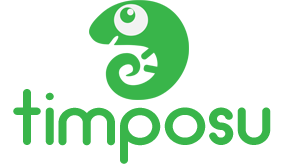
<style>
.page{position:relative;width:289px;height:168px;background:#ffffff}
.page>*{position:absolute;margin:0}
.t1{font:74.6px "Arciform";color:#39b54a;scale:1.08 1}
</style>
<div class="page">
<p class="t1" style="left:13px;top:89px;width:258px;height:75px">timposu</p>
</div>
